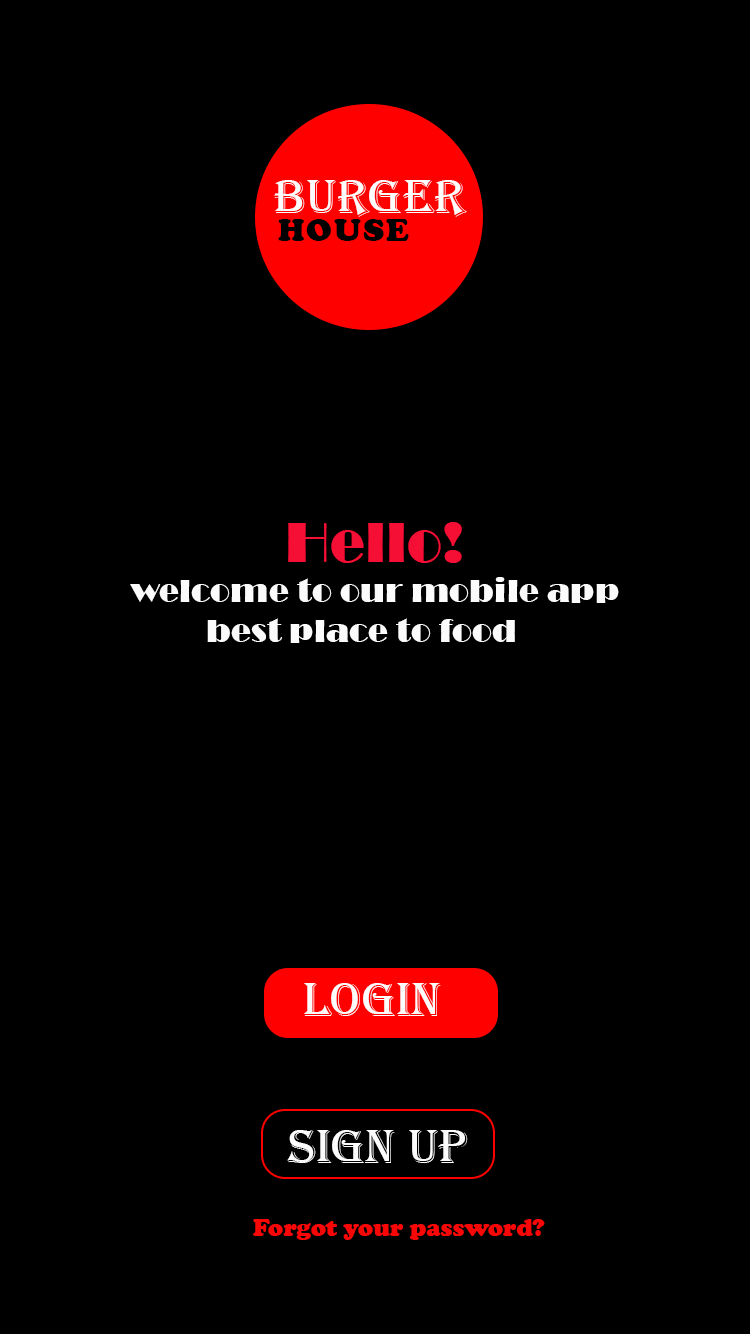
<style>
.page{position:relative;width:750px;height:1334px;background:#000000}
.page>*{position:absolute;margin:0}
.t1{font:50px "Algerian";color:#fdfcfc}
.t2{font:33.3px "CooperBlack";letter-spacing:0.05em;color:#000000}
.t3{font:33.3px "Broadway";color:#fcfbfb}
.t4{font:58.3px "Broadway";color:#f50f35}
.t5{font:25px "CooperBlack";color:#f90707}
</style>
<div class="page">
<p class="t1" style="left:274px;top:180px;width:193px;height:37px">Burger</p>
<p class="t2" style="left:278px;top:219px;width:131px;height:22px">HOUSE</p>
<p class="t3" style="left:130px;top:522px;width:489px;height:121px"><span class="t4">              Hello!<br>      </span>welcome to our mobile app <br>               best place to food</p>
<p class="t1" style="left:304px;top:983px;width:137px;height:33px">login</p>
<p class="t1" style="left:287px;top:1130px;width:181px;height:33px">sign up</p>
<p class="t5" style="left:253px;top:1219px;width:292px;height:21px">Forgot your password?</p>
</div>
